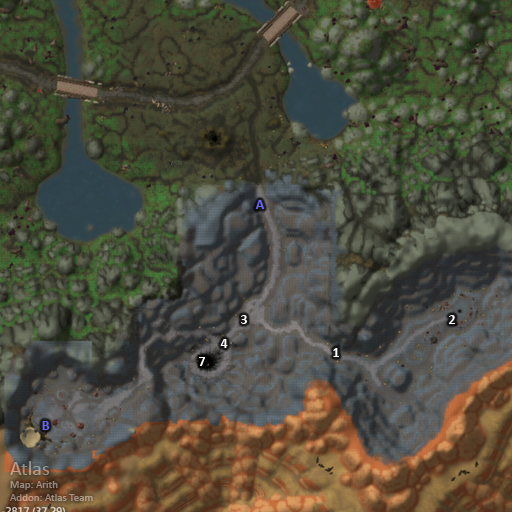
<style>
.page{position:relative;width:512px;height:512px}
.page>*{position:absolute;margin:0}
.t1{font:14px "Calibri-Bold";color:#6666ff}
.t2{font:14px "Calibri-Bold";color:#ffffff}
.t3{font:11px "Calibri";color:#a19284}
.t4{font:20px "Calibri";color:#a19284}
</style>
<div class="page">
<p class="t1" style="left:255px;top:200px;width:9px;height:9px">A</p>
<p class="t2" style="left:241px;top:315px;width:6px;height:9px">3</p>
<p class="t2" style="left:449px;top:315px;width:7px;height:9px">2</p>
<p class="t2" style="left:220px;top:339px;width:8px;height:9px">4</p>
<p class="t2" style="left:333px;top:348px;width:6px;height:9px">1</p>
<p class="t2" style="left:198px;top:357px;width:8px;height:9px">7</p>
<p class="t1" style="left:42px;top:421px;width:8px;height:9px">B</p>
<p class="t3" style="left:10px;top:461px;width:83px;height:40px"><span class="t4">Atlas<br></span>Map: Arith<br>Addon: Atlas Team</p>
</div>
